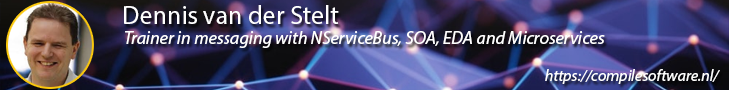
<style>
.page{position:relative;width:729px;height:90px}
.page>*{position:absolute;margin:0}
.t1{font:26px "MyriadPro-Regular";color:#ffffff}
.t2{font:18px "MyriadPro-It";color:#ffffff}
.t3{font:16px "MyriadPro-It";color:#ffffff}
</style>
<div class="page">
<p class="t1" style="left:124px;top:5px;width:215px;height:19px">Dennis van der Stelt</p>
<p class="t2" style="left:125px;top:31px;width:480px;height:17px">Trainer in messaging with NServiceBus, SOA, EDA and Microservices</p>
<p class="t3" style="left:545px;top:69px;width:175px;height:15px">https://compilesoftware.nl/</p>
</div>
